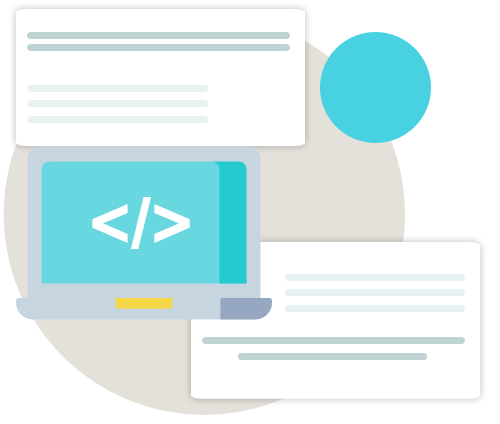
<style>
.page{position:relative;width:500px;height:424px;background:#ffffff}
.page>*{position:absolute;margin:0}
.t1{font:72px "Arial-BoldMT";color:#ffffff;text-transform:uppercase}
</style>
<div class="page">
<p class="t1" style="left:92px;top:197px;width:98px;height:52px">&lt;/&gt;</p>
</div>
